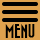
<style>
.page{position:relative;width:40px;height:40px;background:#dfa14e}
.page>*{position:absolute;margin:0}
.t1{font:14px "Bazar";color:#000000}
</style>
<div class="page">
<p class="t1" style="left:5px;top:24px;width:30px;height:14px">MENU</p>
</div>
